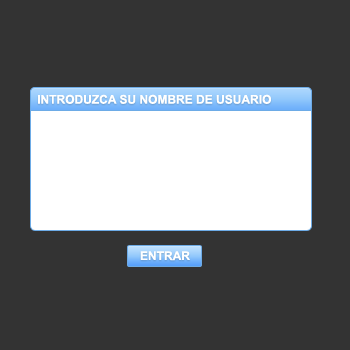
<style>
.page{position:relative;width:350px;height:350px;background:#333333}
.page>*{position:absolute;margin:0}
.t1{font:12px "Arial-BoldMT";color:#ffffff}
</style>
<div class="page">
<p class="t1" style="left:38px;top:94px;width:233px;height:10px">INTRODUZCA SU NOMBRE DE USUARIO</p>
<p class="t1" style="left:140px;top:251px;width:50px;height:10px">ENTRAR</p>
</div>
